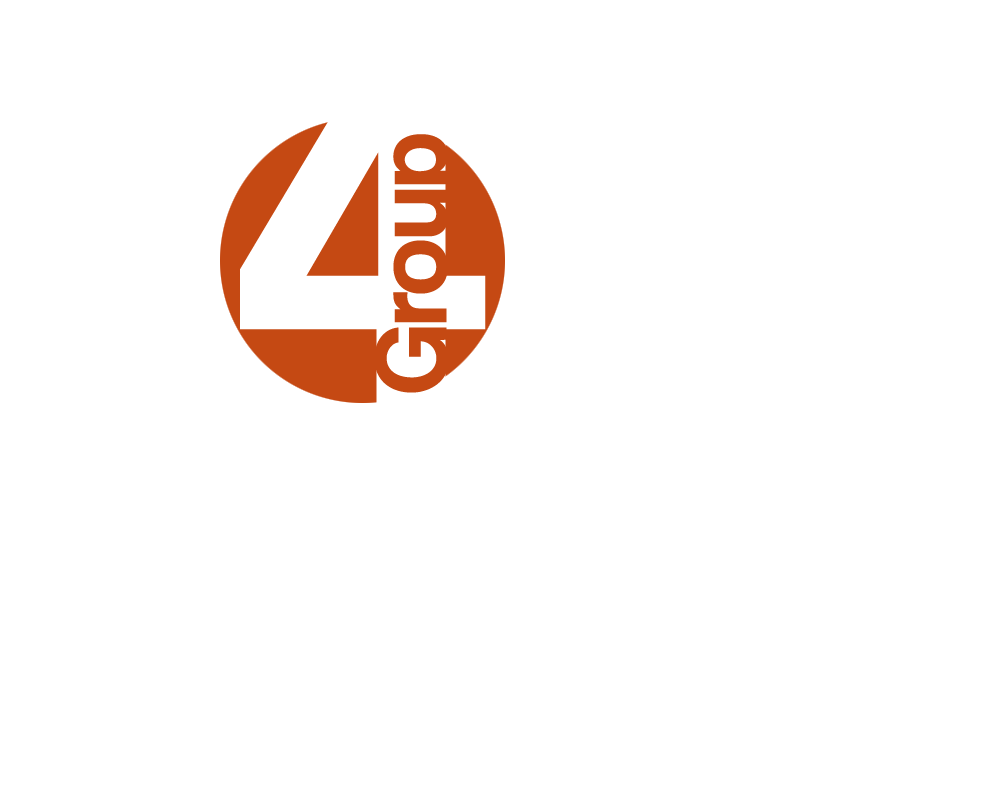
<style>
.page{position:relative;width:1000px;height:800px;background:#ffffff}
.page>*{position:absolute;margin:0}
.t1{font:105px "CoolveticaRg-Regular";color:#c54913}
</style>
<div class="page">
<p class="t1" style="left:374px;top:134px;width:97px;height:259px;rotate:-90deg">Group</p>
</div>
